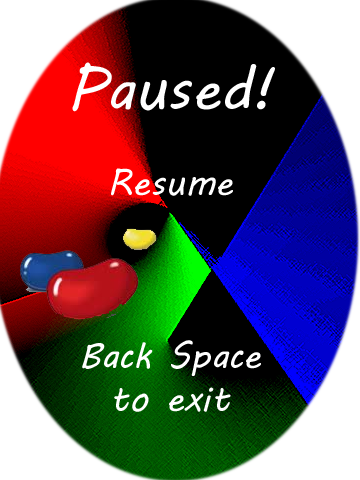
<style>
.page{position:relative;width:360px;height:480px;background:#000000}
.page>*{position:absolute;margin:0}
.t1{font:36px "MVBoli";color:#ffffff}
.t2{font:58.7px "MVBoli";color:#ffffff}
</style>
<div class="page">
<p class="t1" style="left:72px;top:62px;width:203px;height:350px;text-align:center"><span class="t2">Paused!<br></span><br>Resume<br><br><br><br>Back Space<br>to exit</p>
</div>
